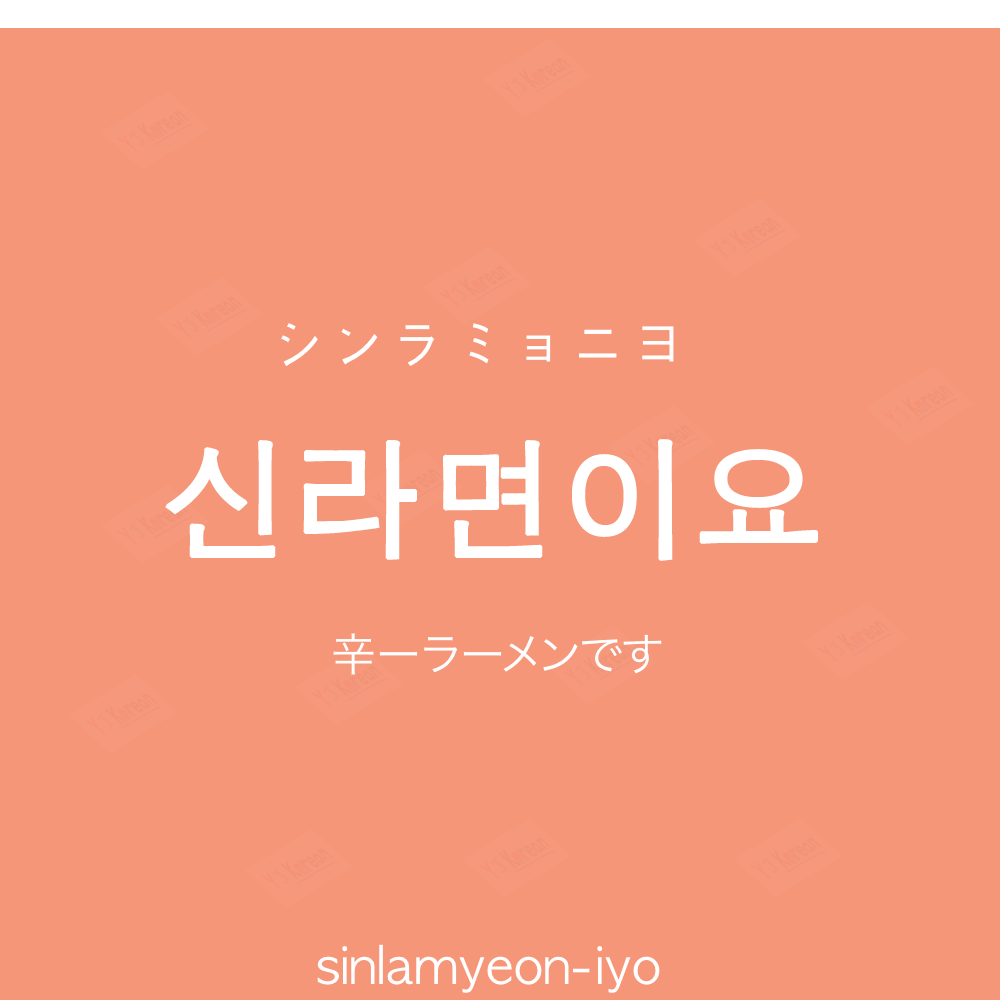
<style>
.page{position:relative;width:1000px;height:1000px;background:#f69679}
.page>*{position:absolute;margin:0}
.t1{font:60px "AppleGothic";color:#ffffff}
.t2{font:130px "AppleGothic";color:#ffffff;font-weight:bold}
.t3{font:45px "HiraKakuProN-W3";color:#ffffff}
.t4{font:50px "AppleGothic";color:#ffffff}
</style>
<div class="page">
<p class="t1" style="left:281px;top:323px;width:393px;height:43px">シンラミョニヨ</p>
<p class="t2" style="left:165px;top:439px;width:653px;height:122px">신라면이요</p>
<p class="t3" style="left:333px;top:633px;width:329px;height:42px">辛ーラーメンです</p>
<p class="t4" style="left:317px;top:944px;width:343px;height:49px">sinlamyeon-iyo</p>
</div>
